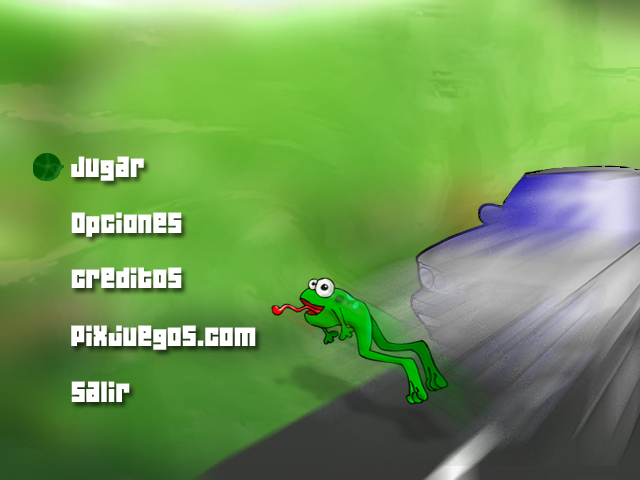
<style>
.page{position:relative;width:640px;height:480px}
.page>*{position:absolute;margin:0}
.t1{font:26px "04b19";color:#ffffff}
</style>
<div class="page">
<p class="t1" style="left:71px;top:156px;width:73px;height:25px">Jugar</p>
<p class="t1" style="left:71px;top:212px;width:111px;height:25px">Opciones</p>
<p class="t1" style="left:71px;top:267px;width:111px;height:21px">creditos</p>
<p class="t1" style="left:71px;top:325px;width:185px;height:25px">Pixjuegos.com</p>
<p class="t1" style="left:71px;top:381px;width:59px;height:21px">Salir</p>
</div>
